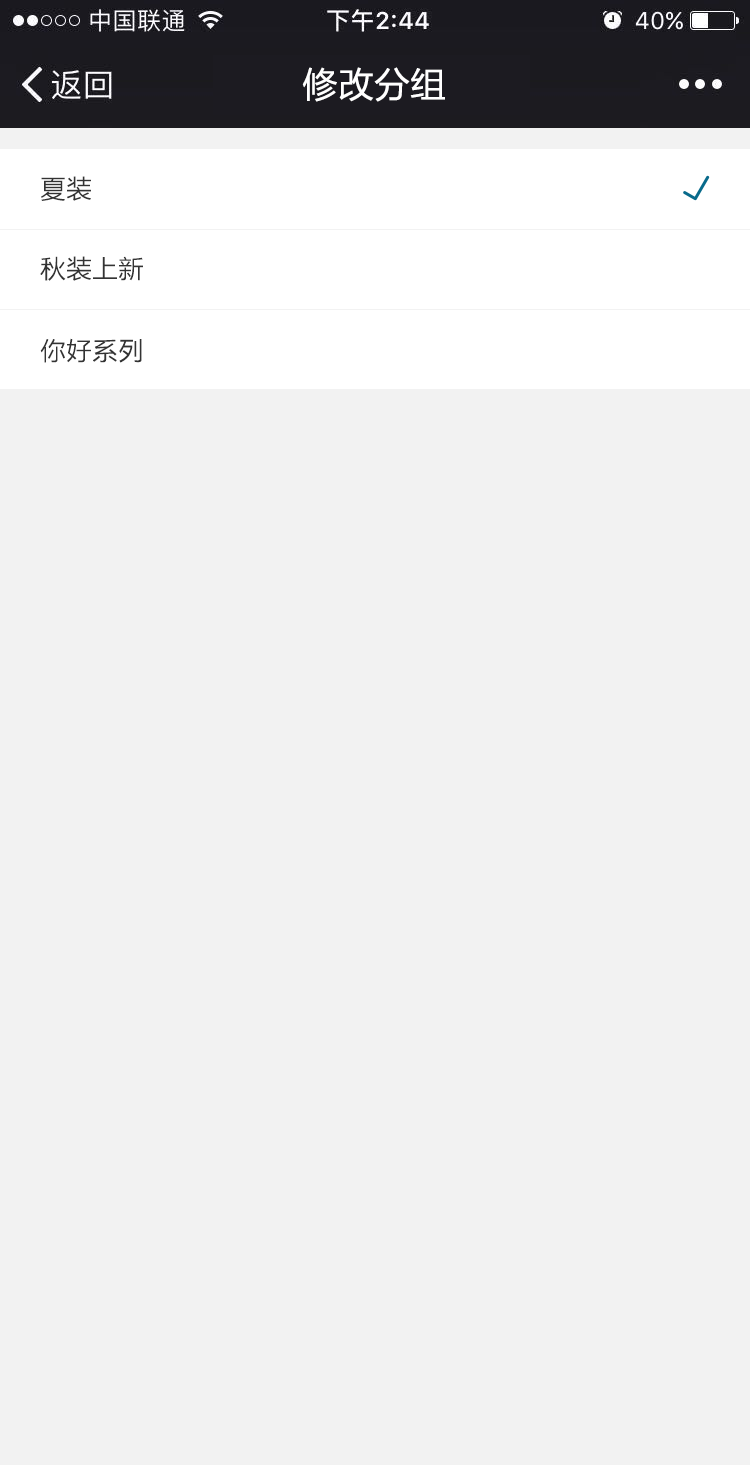
<style>
.page{position:relative;width:750px;height:1465px;background:#f2f2f2}
.page>*{position:absolute;margin:0}
.t1{font:36px "FZLTHK--GBK1-0";color:#ffffff}
.t2{font:26px "FZLTXHK";color:#333333}
</style>
<div class="page">
<p class="t1" style="left:302px;top:67px;width:143px;height:35px">修改分组</p>
<p class="t2" style="left:41px;top:176px;width:50px;height:25px">夏装</p>
<p class="t2" style="left:40px;top:256px;width:103px;height:25px">秋装上新</p>
<p class="t2" style="left:40px;top:338px;width:102px;height:25px">你好系列</p>
</div>
